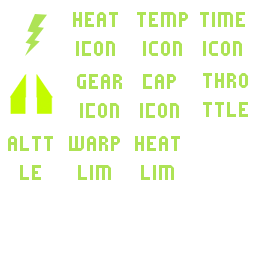
<style>
.page{position:relative;width:256px;height:256px;background:#ffffff}
.page>*{position:absolute;margin:0}
.t1{font:24px "Fruitymicrofont";color:#aee356}
</style>
<div class="page">
<p class="t1" style="left:73px;top:12px;width:45px;height:44px;text-align:center">HEAT ICON</p>
<p class="t1" style="left:137px;top:12px;width:51px;height:44px;text-align:center">temp icon</p>
<p class="t1" style="left:200px;top:12px;width:45px;height:44px;text-align:center">timE IcoN</p>
<p class="t1" style="left:77px;top:74px;width:45px;height:44px;text-align:center">GEAR ICON</p>
<p class="t1" style="left:140px;top:74px;width:39px;height:44px;text-align:center">CAP ICON</p>
<p class="t1" style="left:203px;top:73px;width:45px;height:44px;text-align:center">THROTTLE</p>
<p class="t1" style="left:8px;top:136px;width:45px;height:44px;text-align:center">ALTTLE</p>
<p class="t1" style="left:69px;top:136px;width:51px;height:44px;text-align:center">warp lim</p>
<p class="t1" style="left:135px;top:136px;width:45px;height:44px;text-align:center">heat Lim</p>
</div>
